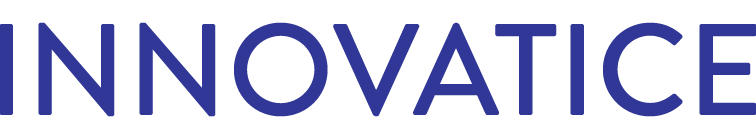
<style>
.page{position:relative;width:756px;height:139px;background:#ffffff}
.page>*{position:absolute;margin:0}
.t1{font:130px "BrandonGrotesque-Medium";color:#303796}
</style>
<div class="page">
<p class="t1" style="left:0px;top:22px;width:757px;height:95px">INNOVATICE</p>
</div>
